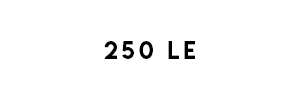
<style>
.page{position:relative;width:300px;height:100px;background:#ffffff}
.page>*{position:absolute;margin:0}
.t1{font:22px "LemonMilk";letter-spacing:0.18em;color:#000000;text-transform:uppercase}
</style>
<div class="page">
<p class="t1" style="left:104px;top:41px;width:91px;height:18px">250 LE</p>
</div>
